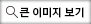
<style>
.page{position:relative;width:91px;height:24px;background:#ffffff}
.page>*{position:absolute;margin:0}
.t1{font:10px "YoonGothicPro770";color:#000000}
</style>
<div class="page">
<p class="t1" style="left:19px;top:7px;width:65px;height:11px">큰 이미지 보기</p>
</div>
